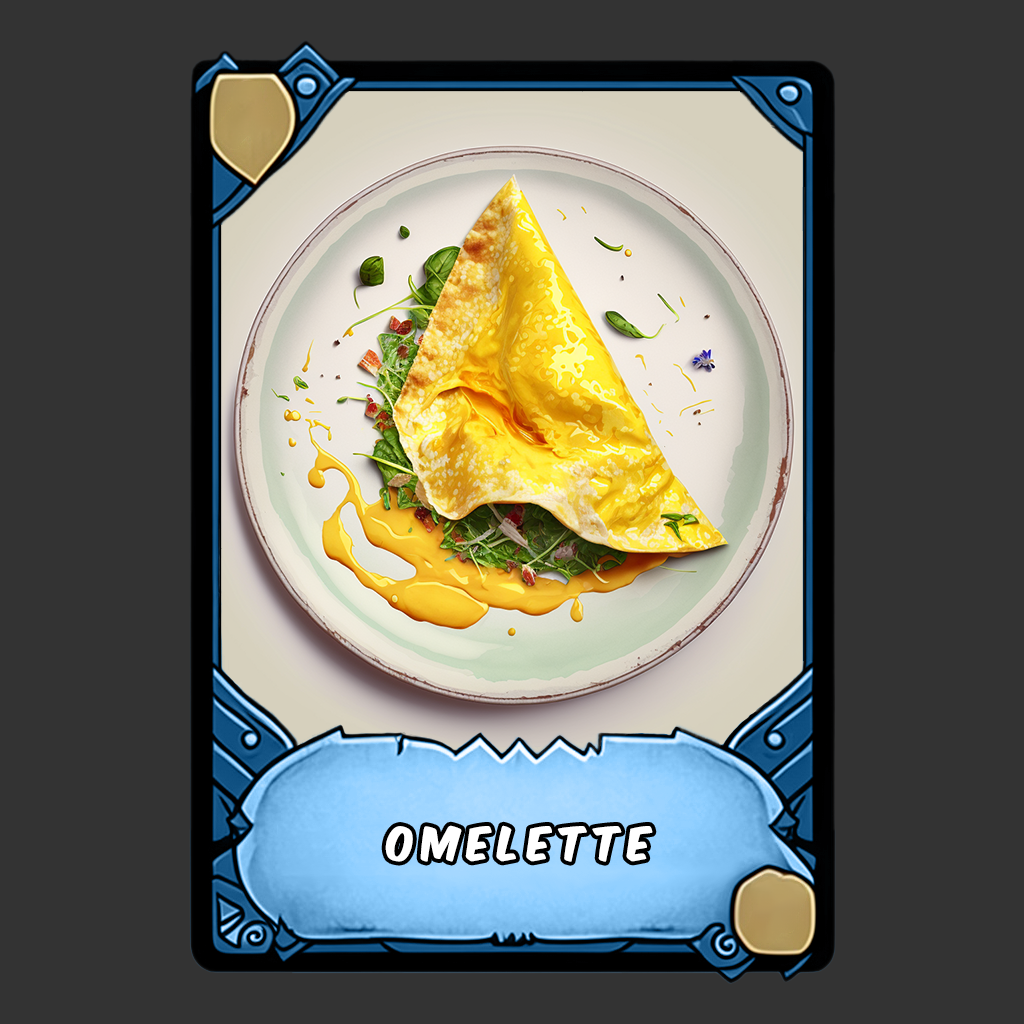
<style>
.page{position:relative;width:1024px;height:1024px;background:#333333}
.page>*{position:absolute;margin:0}
.t1{font:40px "KomikaAxis";letter-spacing:0.2em;color:#ffffff}
</style>
<div class="page">
<p class="t1" style="left:385px;top:825px;width:268px;height:37px">omelette</p>
</div>
